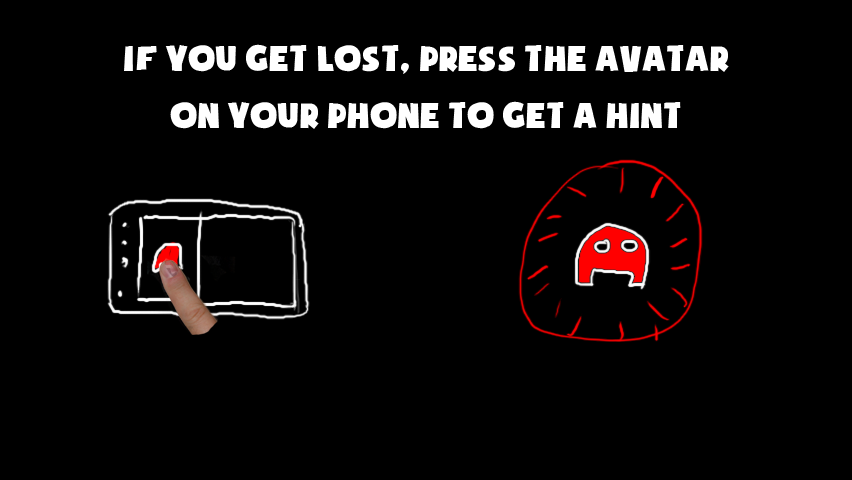
<style>
.page{position:relative;width:852px;height:480px;background:#000000}
.page>*{position:absolute;margin:0}
.t1{font:40px/57px "SoupofJustice";color:#ffffff}
</style>
<div class="page">
<p class="t1" style="left:124px;top:44px;width:605px;height:85px;text-align:center">If you get lost, press the avatar<br>on your phone to get a hint</p>
</div>
